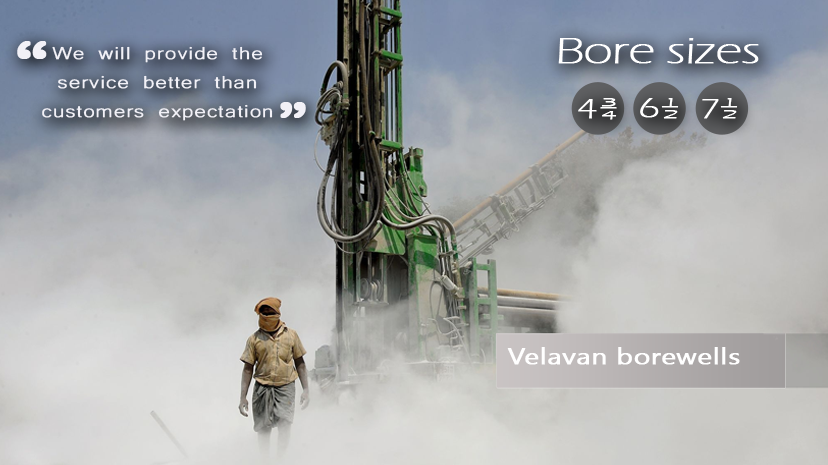
<style>
.page{position:relative;width:828px;height:465px}
.page>*{position:absolute;margin:0}
.t1{font:57.8px "ArialRoundedMTBold";letter-spacing:0.01em;color:#f2f1f7;font-weight:bold;scale:1.24 1}
.t2{font:37.5px "ErasITC-Light";letter-spacing:-0.03em;color:#ffffff;font-weight:bold;scale:1.37 1}
.t3{font:22.2px/29.4px "Microsoft-Yi-Baiti";letter-spacing:0.01em;color:#f2f1f7;font-weight:bold;scale:1.24 1}
.t4{font:50.7px "ArialRoundedMTBold";letter-spacing:0.01em;color:#f2f1f7;font-weight:bold;scale:1.24 1}
.t5{font:29.3px "ErasITC-Light";letter-spacing:-0.03em;color:#ffffff;font-weight:bold;scale:1.37 1}
.t6{font:12.1px/0.3px "ErasITC-Light";letter-spacing:-0.03em;color:#ffffff;font-weight:bold;scale:2.44 1}
.t7{font:12.1px/12.1px "ErasITC-Light";letter-spacing:-0.03em;color:#ffffff;font-weight:bold;scale:2.44 1}
.t8{font:29.4px "ErasITC-Light";letter-spacing:-0.03em;color:#ffffff;font-weight:bold;scale:1.37 1}
.t9{font:12.1px "ErasITC-Light";letter-spacing:-0.03em;color:#ffffff;font-weight:bold;scale:2.45 1}
.t10{font:12.1px/0.3px "ErasITC-Light";letter-spacing:-0.03em;color:#ffffff;font-weight:bold;scale:2.45 1}
.t11{font:12.1px/12.1px "ErasITC-Light";letter-spacing:-0.03em;color:#ffffff;font-weight:bold;scale:2.45 1}
.t12{font:29.3px "ErasITC-Light";letter-spacing:-0.03em;color:#ffffff;font-weight:bold;scale:1.38 1}
.t13{font:12.1px/0.3px "ErasITC-Light";letter-spacing:-0.03em;color:#ffffff;font-weight:bold;scale:2.46 1}
.t14{font:12.1px/12.1px "ErasITC-Light";letter-spacing:-0.03em;color:#ffffff;font-weight:bold;scale:2.46 1}
.t15{font:22.4px "NirmalaUI";letter-spacing:0.01em;color:#f2f1f7;font-weight:bold;scale:1.23 1}
</style>
<div class="page">
<p class="t1" style="left:17px;top:41px;width:30px;height:18px">“</p>
<p class="t2" style="left:558px;top:38px;width:201px;height:26px">Bore sizes</p>
<p class="t3" style="left:42px;top:46px;width:231px;height:75px;text-align:justify">We will provide the <br>service better than <br>customers expectation</p>
<p class="t4" style="left:280px;top:102px;width:26px;height:16px">”</p>
<p class="t5" style="left:578px;top:99px;width:19px;height:20px">4</p>
<p class="t6" style="left:600px;top:98px;width:17px;height:22px">3_<br><span class="t7">4</span></p>
<p class="t8" style="left:640px;top:98px;width:19px;height:20px"><span class="t9"><br></span>6</p>
<p class="t10" style="left:661px;top:98px;width:18px;height:21px">1_<br><span class="t11">2</span></p>
<p class="t12" style="left:702px;top:99px;width:17px;height:20px">7</p>
<p class="t13" style="left:720px;top:98px;width:18px;height:21px">1_<br><span class="t14">2</span></p>
<p class="t15" style="left:507px;top:347px;width:233px;height:18px">Velavan borewells</p>
</div>
